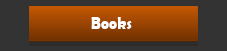
<style>
.page{position:relative;width:227px;height:51px;background:#333333}
.page>*{position:absolute;margin:0}
.t1{font:18.2px "BerlinSansFBDemi-Bold";color:#ffffff;scale:0.84 1}
</style>
<div class="page">
<p class="t1" style="left:91px;top:17px;width:41px;height:12px">Books</p>
</div>
